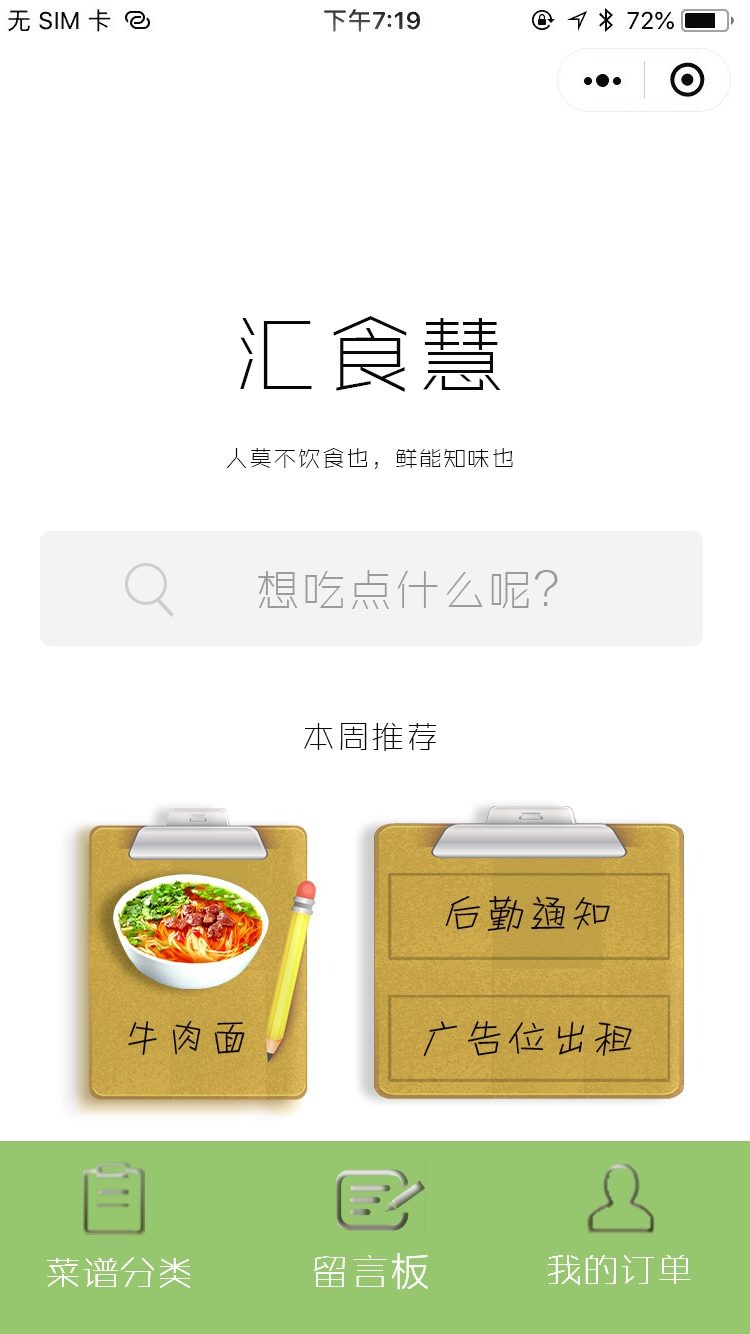
<style>
.page{position:relative;width:750px;height:1334px;background:#ffffff}
.page>*{position:absolute;margin:0}
.t1{font:87.7px "ZHSRXT--GBK1-0";letter-spacing:0.04em;color:#080808}
.t2{font:23.4px "ZHSRXT--GBK1-0";letter-spacing:0.04em;color:#080808}
.t3{font:44.9px "ZHSRXT--GBK1-0";letter-spacing:0.04em;color:#9c9b9b}
.t4{font:33.2px "ZHSRXT--GBK1-0";letter-spacing:0.04em;color:#080808}
.t5{font:41.3px "HYg3gj";letter-spacing:0.04em;color:#040404}
.t6{font:41px "HYg3gj";letter-spacing:0.04em;color:#040404}
</style>
<div class="page">
<p class="t1" style="left:240px;top:316px;width:261px;height:76px">汇食慧</p>
<p class="t2" style="left:226px;top:448px;width:287px;height:21px">人莫不饮食也，鲜能知味也</p>
<p class="t3" style="left:258px;top:570px;width:300px;height:39px">想吃点什么呢？</p>
<p class="t4" style="left:304px;top:723px;width:133px;height:28px">本周推荐</p>
<p class="t5" style="left:445px;top:896px;width:165px;height:36px">后勤通知</p>
<p class="t6" style="left:128px;top:1020px;width:117px;height:35px">牛肉面</p>
<p class="t5" style="left:423px;top:1021px;width:209px;height:36px">广告位出租</p>
</div>
